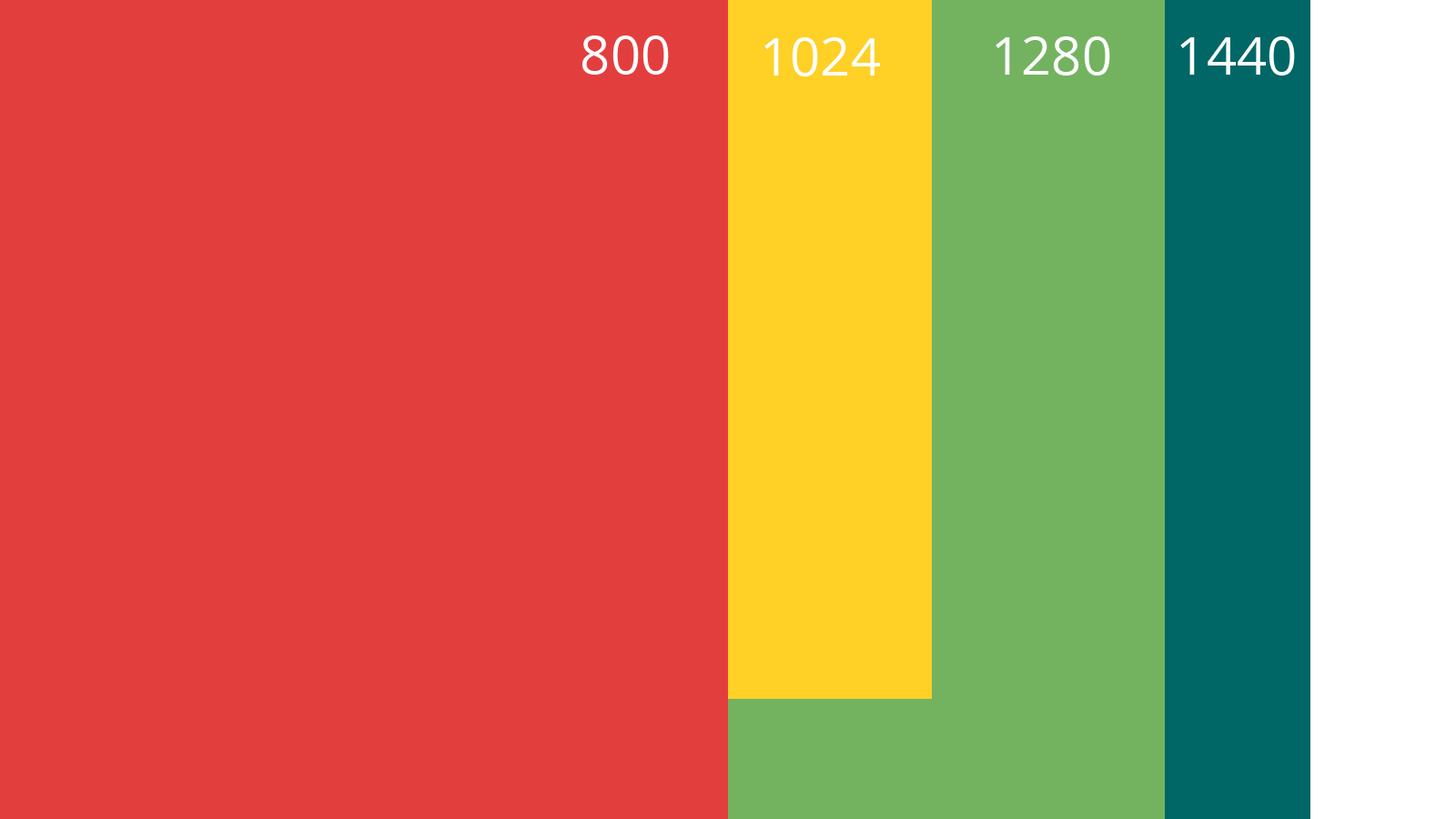
<style>
.page{position:relative;width:1456px;height:819px;background:#e33e3e}
.page>*{position:absolute;margin:0}
.t1{font:53.1px "OpenSans";color:#ffffff}
</style>
<div class="page">
<p class="t1" style="left:582px;top:35px;width:87px;height:40px">800</p>
<p class="t1" style="left:764px;top:37px;width:116px;height:39px">1024</p>
<p class="t1" style="left:996px;top:36px;width:114px;height:40px">1280</p>
<p class="t1" style="left:1180px;top:36px;width:115px;height:40px">1440</p>
</div>
